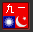
<style>
.page{position:relative;width:33px;height:32px;background:#f20000}
.page>*{position:absolute;margin:0}
.t1{font:10.4px "SimSun";color:#ffffff}
</style>
<div class="page">
<p class="t1" style="left:6px;top:4px;width:19px;height:9px">九一</p>
</div>
